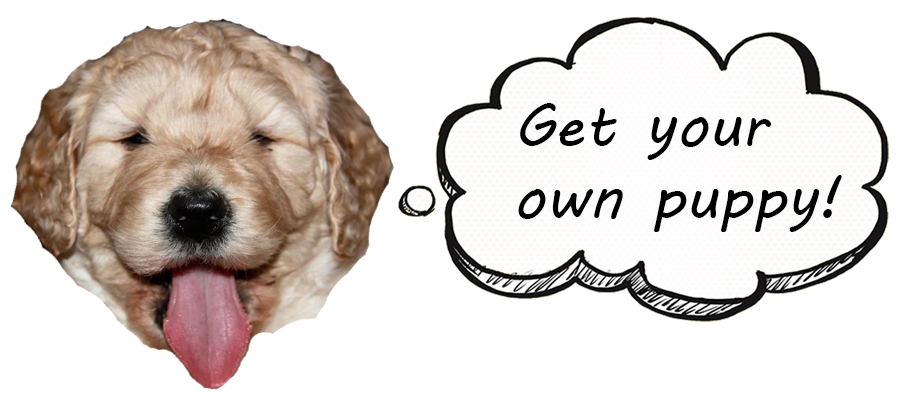
<style>
.page{position:relative;width:902px;height:408px;background:#ffffff}
.page>*{position:absolute;margin:0}
.t1{font:60px "MVBoli";color:#000000}
</style>
<div class="page">
<p class="t1" style="left:518px;top:103px;width:324px;height:129px">Get your own puppy!</p>
</div>
